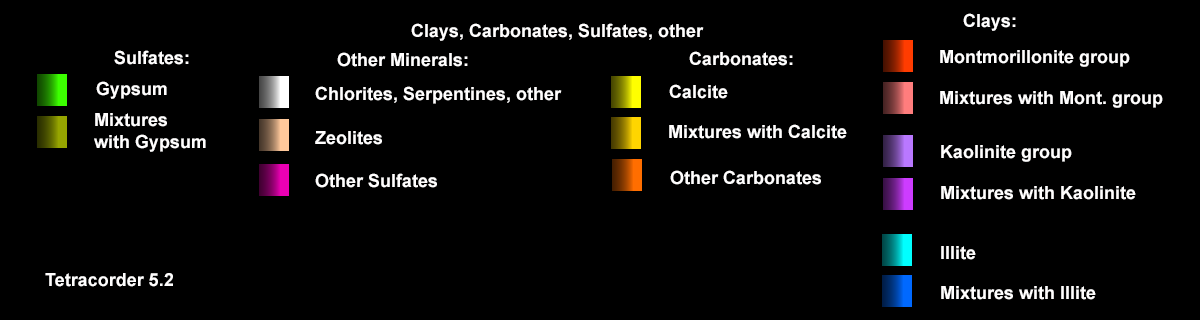
<style>
.page{position:relative;width:1200px;height:320px;background:#000000}
.page>*{position:absolute;margin:0}
.t1{font:18px "Arial-BoldMT";color:#fffefe}
</style>
<div class="page">
<p class="t1" style="left:963px;top:13px;width:53px;height:18px">Clays:</p>
<p class="t1" style="left:411px;top:23px;width:293px;height:18px">Clays, Carbonates, Sulfates, other</p>
<p class="t1" style="left:114px;top:50px;width:75px;height:15px">Sulfates:</p>
<p class="t1" style="left:337px;top:52px;width:131px;height:15px">Other Minerals:</p>
<p class="t1" style="left:689px;top:51px;width:104px;height:15px">Carbonates:</p>
<p class="t1" style="left:940px;top:50px;width:190px;height:17px">Montmorillonite group</p>
<p class="t1" style="left:96px;top:81px;width:71px;height:18px">Gypsum</p>
<p class="t1" style="left:315px;top:86px;width:247px;height:18px">Chlorites, Serpentines, other</p>
<p class="t1" style="left:669px;top:84px;width:59px;height:15px">Calcite</p>
<p class="t1" style="left:940px;top:91px;width:223px;height:17px">Mixtures with Mont. group</p>
<p class="t1" style="left:94px;top:113px;width:112px;height:39px">Mixtures<br>with Gypsum</p>
<p class="t1" style="left:669px;top:124px;width:178px;height:15px">Mixtures with Calcite</p>
<p class="t1" style="left:315px;top:131px;width:67px;height:14px">Zeolites</p>
<p class="t1" style="left:941px;top:145px;width:131px;height:17px">Kaolinite group</p>
<p class="t1" style="left:315px;top:173px;width:122px;height:15px">Other Sulfates</p>
<p class="t1" style="left:670px;top:170px;width:151px;height:15px">Other Carbonates</p>
<p class="t1" style="left:941px;top:186px;width:195px;height:14px">Mixtures with Kaolinite</p>
<p class="t1" style="left:941px;top:246px;width:35px;height:14px">Illite</p>
<p class="t1" style="left:45px;top:273px;width:128px;height:14px">Tetracorder 5.2</p>
<p class="t1" style="left:941px;top:286px;width:155px;height:14px">Mixtures with Illite</p>
</div>
